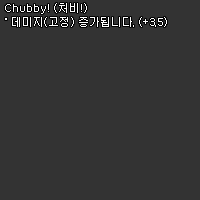
<style>
.page{position:relative;width:200px;height:200px;background:#333333}
.page>*{position:absolute;margin:0}
.t1{font:11px/14px "Dotum";color:#ffffff}
</style>
<div class="page">
<p class="t1" style="left:5px;top:3px;width:162px;height:24px">Chubby! (처비!)<br>˚ 데미지(고정) 증가됩니다. (+3.5)</p>
</div>
